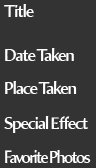
<style>
.page{position:relative;width:96px;height:168px;background:#333333}
.page>*{position:absolute;margin:0}
.t1{font:17.3px "AmiraParadiso";letter-spacing:-0.08em;color:#ffffff}
.t2{font:17.6px "AmiraParadiso";letter-spacing:-0.1em;color:#ffffff;scale:0.91 1}
</style>
<div class="page">
<p class="t1" style="left:4px;top:4px;width:30px;height:13px">Title</p>
<p class="t1" style="left:5px;top:48px;width:69px;height:13px">Date Taken</p>
<p class="t1" style="left:5px;top:81px;width:72px;height:13px">Place Taken</p>
<p class="t1" style="left:4px;top:116px;width:84px;height:17px">Special Effect</p>
<p class="t2" style="left:5px;top:150px;width:86px;height:13px">Favorite Photos</p>
</div>
